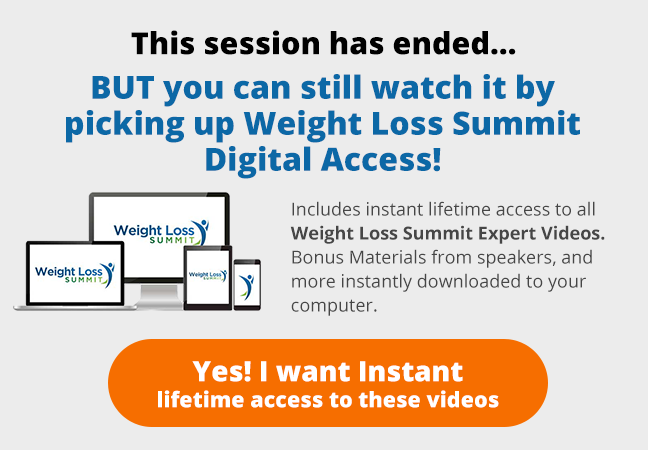
<style>
.page{position:relative;width:648px;height:450px;background:#ececec}
.page>*{position:absolute;margin:0}
.t1{font:30.5px "OpenSans-Extrabold";color:#000000}
.t2{font:32px/36px "OpenSans-Extrabold";color:#0c68a6}
.t3{font:18px/24px "OpenSans";color:#464646}
.t4{font:18px/24px "OpenSans-Bold";color:#464646}
.t5{font:21.6px "OpenSans-Extrabold";color:#ffffff}
.t6{font:28px "OpenSans-Extrabold";color:#ffffff}
</style>
<div class="page">
<p class="t1" style="left:131px;top:30px;width:385px;height:25px">This session has ended…</p>
<p class="t2" style="left:66px;top:74px;width:514px;height:105px;text-align:center">BUT you can still watch it by<br>picking up Weight Loss Summit<br>Digital Access!</p>
<p class="t3" style="left:290px;top:201px;width:315px;height:115px">Includes instant lifetime access to all<br><span class="t4">Weight Loss Summit Expert Videos.<br></span>Bonus Materials from speakers, and<br>more instantly downloaded to your<br>computer.</p>
<p class="t5" style="left:158px;top:361px;width:341px;height:47px;text-align:center"><span class="t6">Yes! I want Instant<br></span>lifetime access to these videos</p>
</div>
